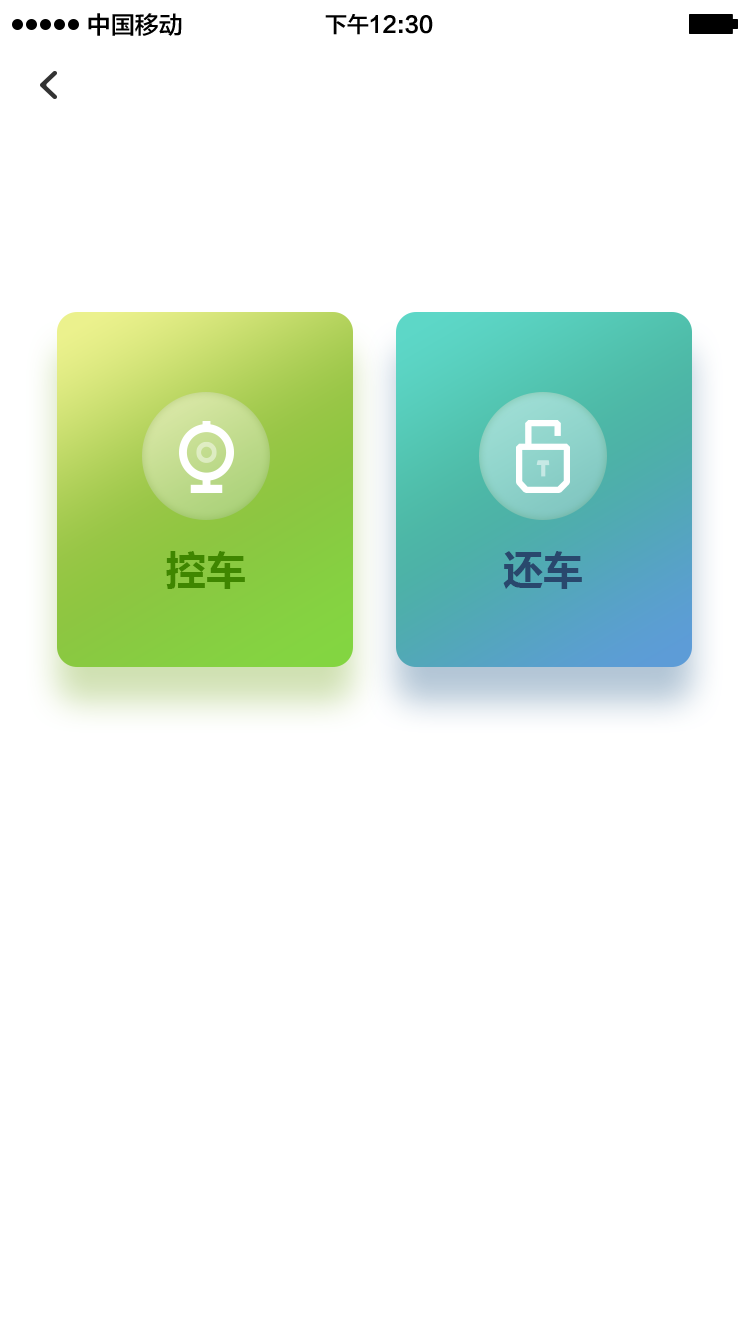
<style>
.page{position:relative;width:750px;height:1334px;background:#ffffff}
.page>*{position:absolute;margin:0}
.t1{font:24px "FZLTZHK--GBK1-0";color:#000000}
.t2{font:22px "FZLTZHK--GBK1-0";color:#000000}
.t3{font:40px "MicrosoftYaHei-Bold";color:#3f8600}
.t4{font:40px "MicrosoftYaHei-Bold";color:#29486d}
</style>
<div class="page">
<p class="t1" style="left:88px;top:13px;width:94px;height:23px">中国移动</p>
<p class="t2" style="left:325px;top:14px;width:108px;height:21px">下午12:30</p>
<p class="t3" style="left:166px;top:551px;width:79px;height:38px">控车</p>
<p class="t4" style="left:503px;top:551px;width:79px;height:38px">还车</p>
</div>
